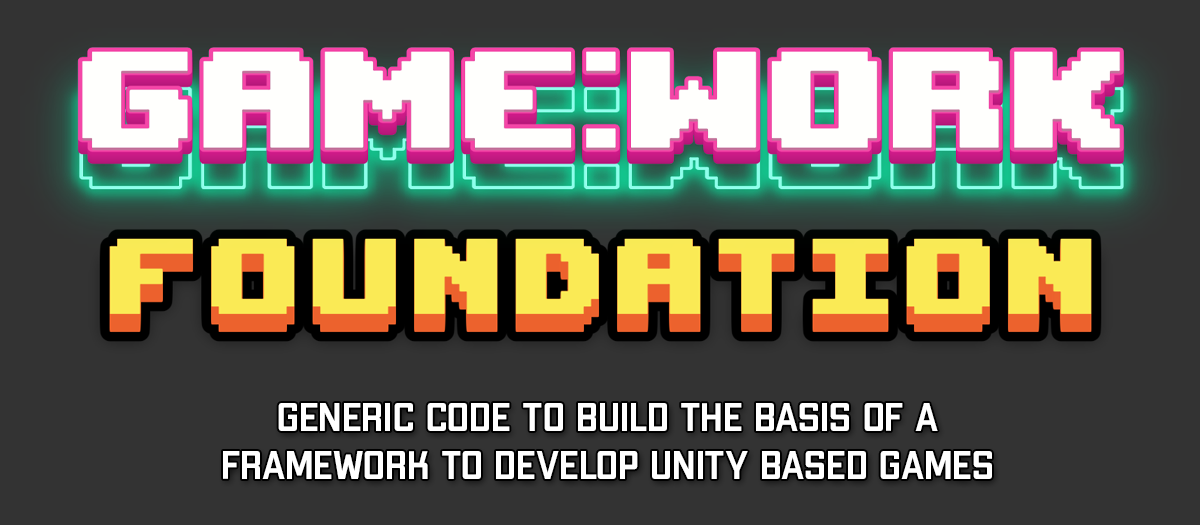
<style>
.page{position:relative;width:1200px;height:525px;background:#333333}
.page>*{position:absolute;margin:0}
.t1{font:40px "ApexMk3-Medium";color:#ffffff}
</style>
<div class="page">
<p class="t1" style="left:223px;top:403px;width:769px;height:76px;text-align:center">Generic code to build the basis of a<br>framework to develop Unity based games</p>
</div>
